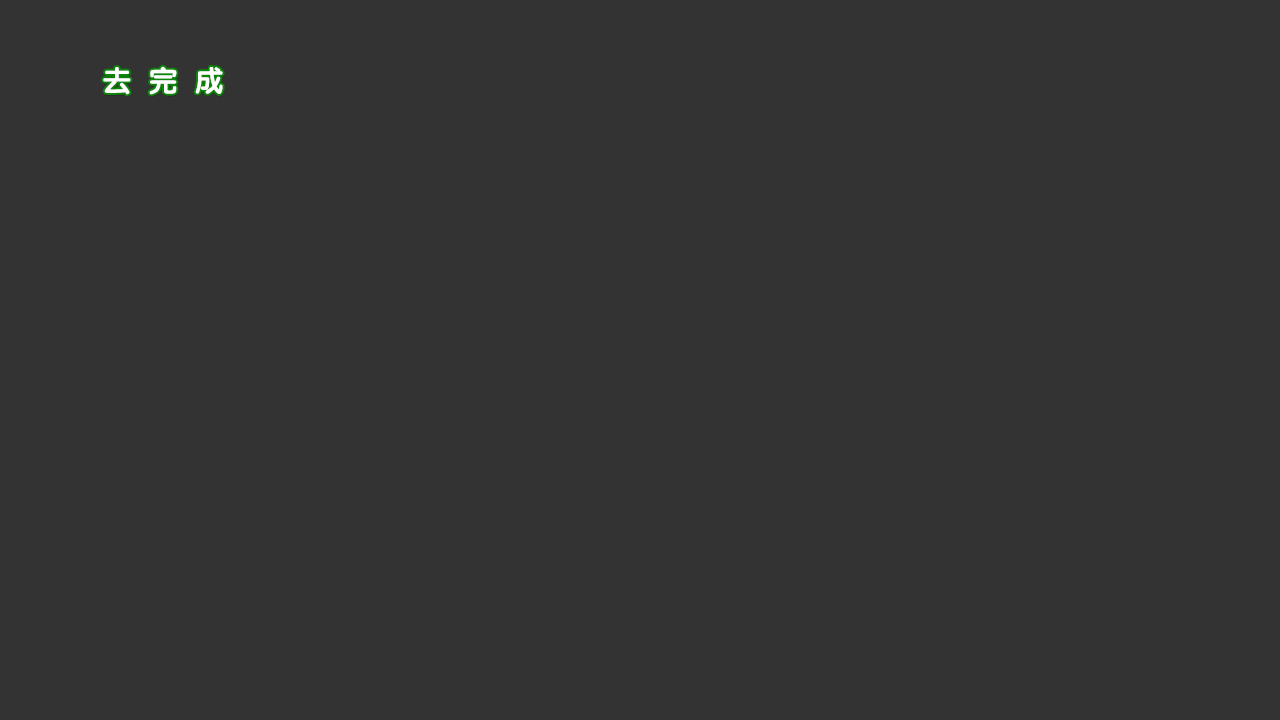
<style>
.page{position:relative;width:1280px;height:720px;background:#333333}
.page>*{position:absolute;margin:0}
.t1{font:28px "STYuanti-SC-Bold";letter-spacing:0.2em;color:#ffffff}
</style>
<div class="page">
<p class="t1" style="left:103px;top:66px;width:120px;height:29px">去 完 成</p>
</div>
